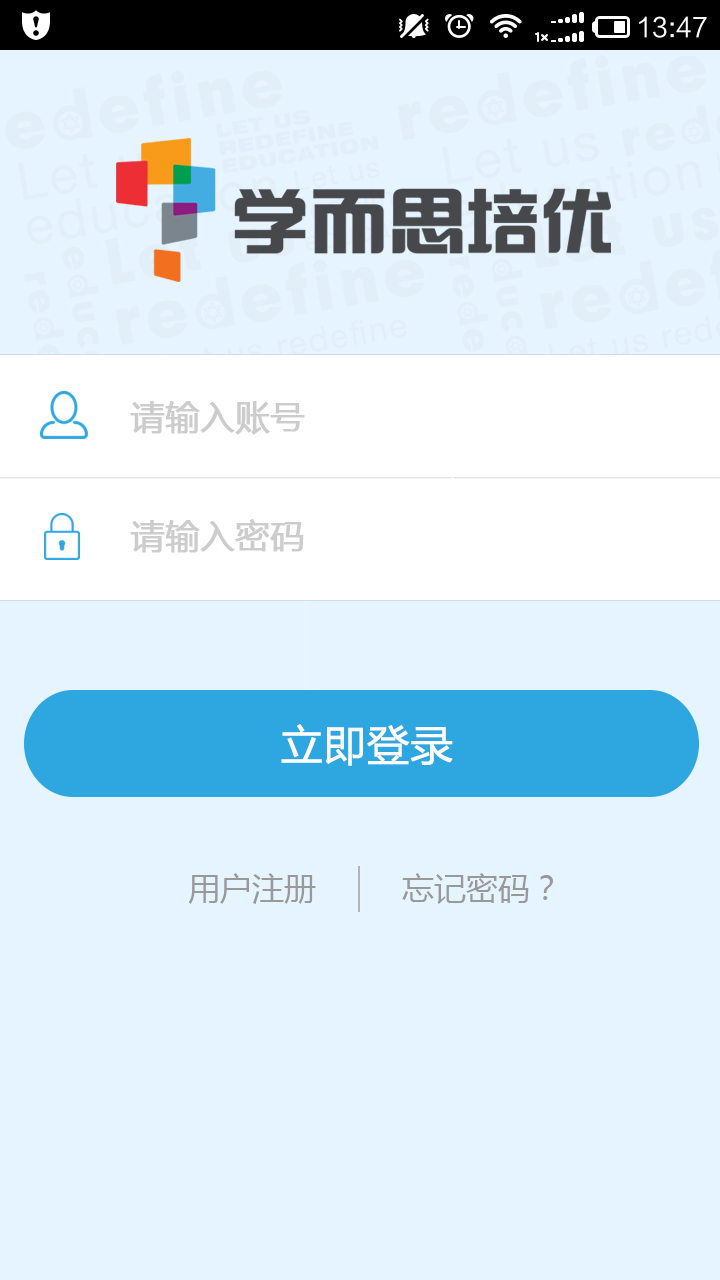
<style>
.page{position:relative;width:720px;height:1280px;background:#e6f4ff}
.page>*{position:absolute;margin:0}
.t1{font:34px "MicrosoftYaHei";color:#cccccc;font-weight:bold}
.t2{font:42px "MicrosoftYaHei";color:#ffffff;font-weight:bold}
.t3{font:32px "MicrosoftYaHei";color:#999999}
</style>
<div class="page">
<p class="t1" style="left:130px;top:401px;width:175px;height:34px">请输入账号</p>
<p class="t1" style="left:130px;top:519px;width:174px;height:34px">请输入密码</p>
<p class="t2" style="left:281px;top:724px;width:172px;height:42px">立即登录</p>
<p class="t3" style="left:188px;top:873px;width:128px;height:31px">用户注册</p>
<p class="t3" style="left:402px;top:873px;width:151px;height:31px">忘记密码？</p>
</div>
